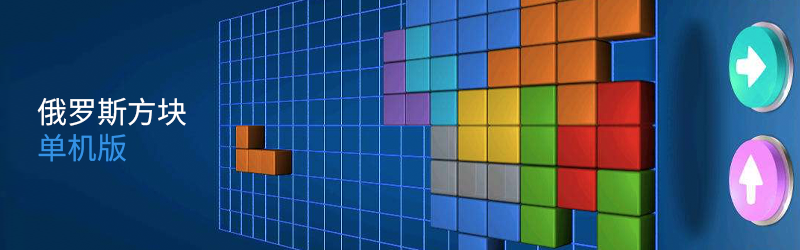
<style>
.page{position:relative;width:800px;height:250px}
.page>*{position:absolute;margin:0}
.t1{font:30px/36px "NotoSansHans-Regular";color:#ffffff;text-transform:uppercase}
.t2{font:30px/36px "NotoSansHans-Regular";color:#3492e6;text-transform:uppercase}
</style>
<div class="page">
<p class="t1" style="left:37px;top:97px;width:149px;height:65px">俄罗斯方块<br><span class="t2">单机版</span></p>
</div>
